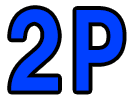
<style>
.page{position:relative;width:129px;height:105px;background:#ffffff}
.page>*{position:absolute;margin:0}
.t1{font:100px "HGPSoeiKakugothicUB";letter-spacing:0.05em;color:#0040ff}
</style>
<div class="page">
<p class="t1" style="left:11px;top:9px;width:112px;height:82px">2P</p>
</div>
